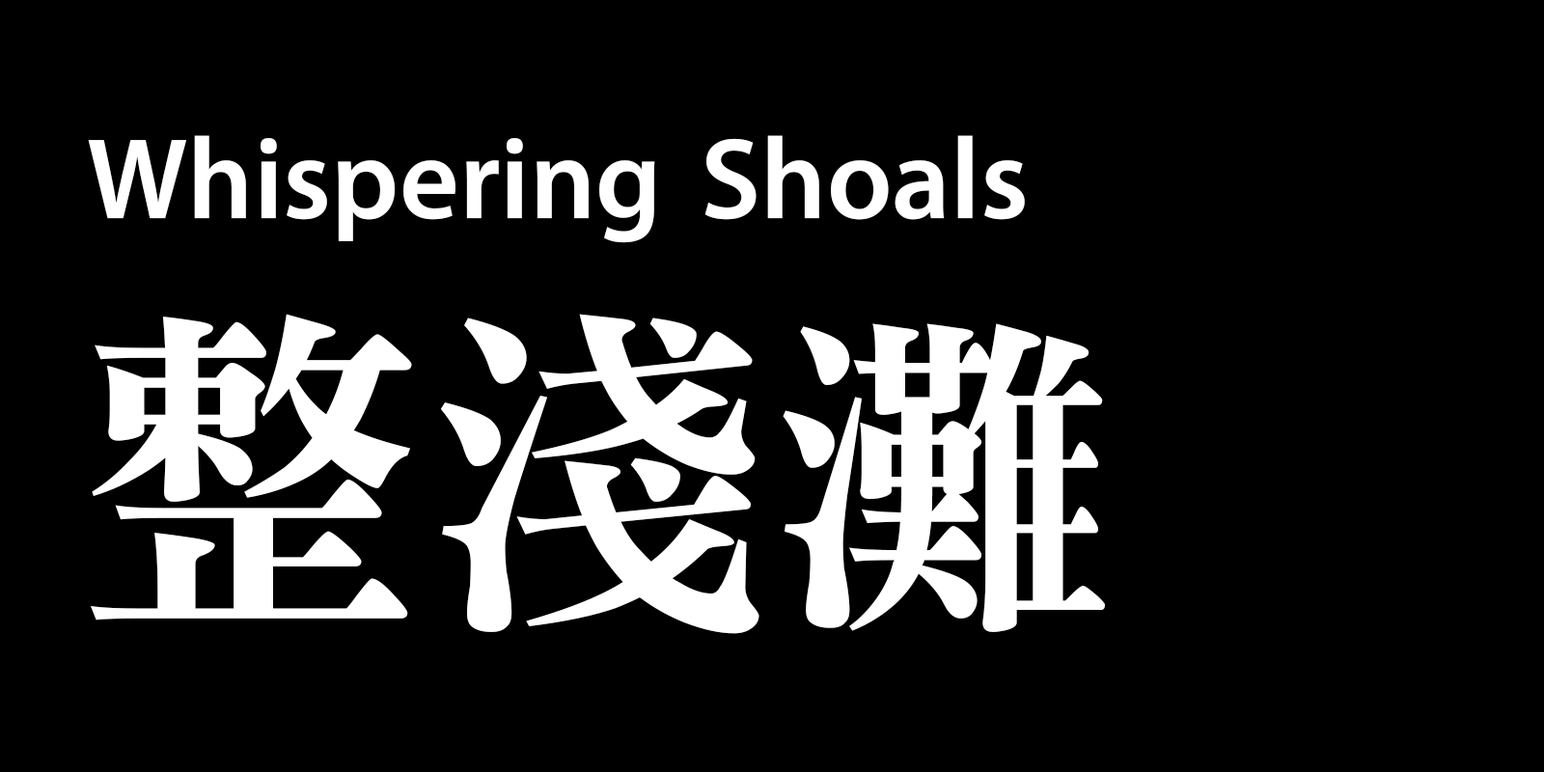
<style>
.page{position:relative;width:1544px;height:772px;background:#000000}
.page>*{position:absolute;margin:0}
.t1{font:115.8px "MTR-Sung";color:#ffffff}
.t2{font:347.5px "MTR-Sung";color:#ffffff}
</style>
<div class="page">
<p class="t1" style="left:88px;top:135px;width:937px;height:108px">Whispering Shoals</p>
<p class="t2" style="left:91px;top:314px;width:1014px;height:320px">整淺灘</p>
</div>
